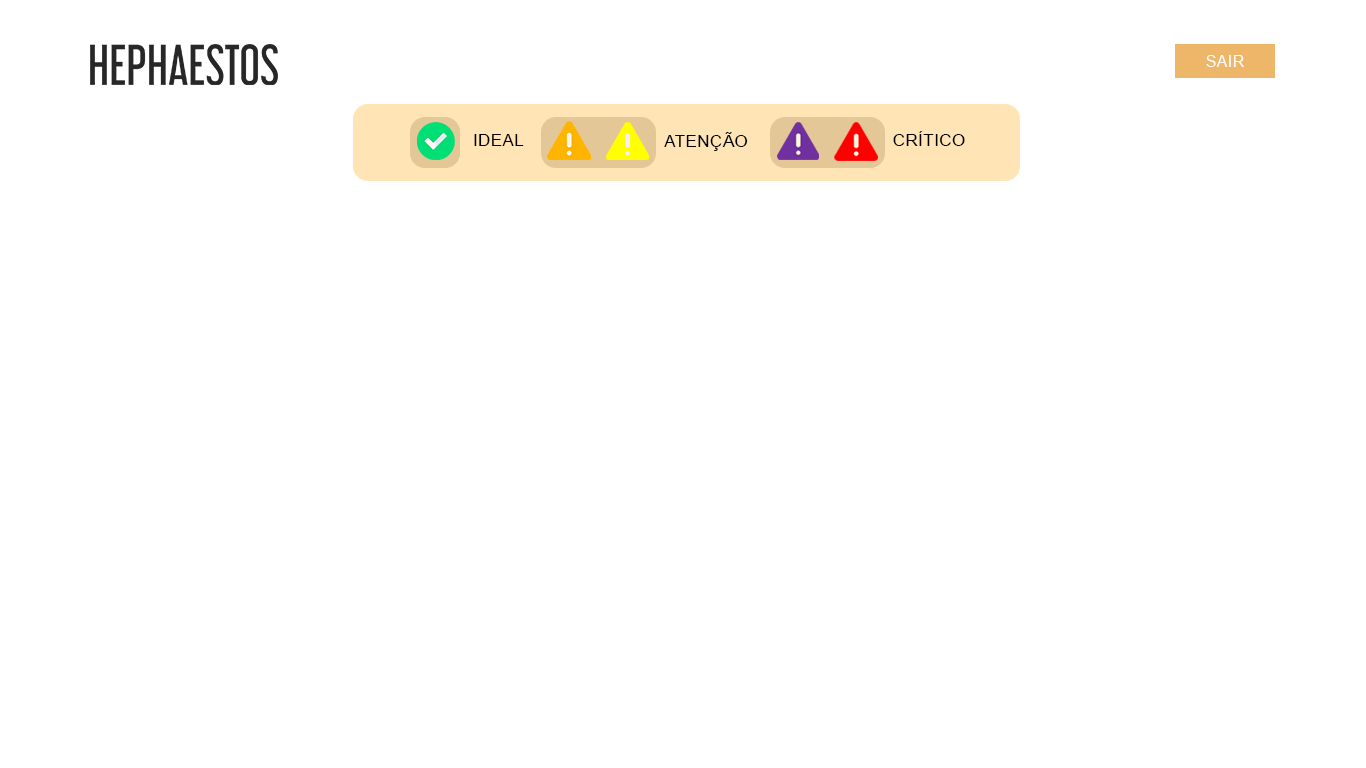
<style>
.page{position:relative;width:1366px;height:768px;background:#ffffff}
.page>*{position:absolute;margin:0}
.t1{font:16px "ArialMT";letter-spacing:0.025em;color:#ffffff}
.t2{font:17px "ArialMT";letter-spacing:0.025em;color:#000000}
</style>
<div class="page">
<p class="t1" style="left:1206px;top:55px;width:38px;height:12px">SAIR</p>
<p class="t2" style="left:474px;top:134px;width:50px;height:12px">IDEAL</p>
<p class="t2" style="left:664px;top:132px;width:84px;height:19px">ATENÇÃO</p>
<p class="t2" style="left:893px;top:131px;width:72px;height:15px">CRÍTICO</p>
</div>
